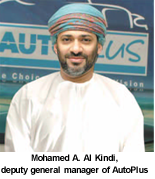
<style>
.page{position:relative;width:155px;height:179px}
.page>*{position:absolute;margin:0}
.t1{font:9px/12px "Arial-BoldMT";letter-spacing:-0.025em;color:#000000}
</style>
<div class="page">
<p class="t1" style="left:1px;top:154px;width:147px;height:21px;text-align:center">Mohamed A. Al Kindi, <br>deputy general manager of AutoPlus</p>
</div>
